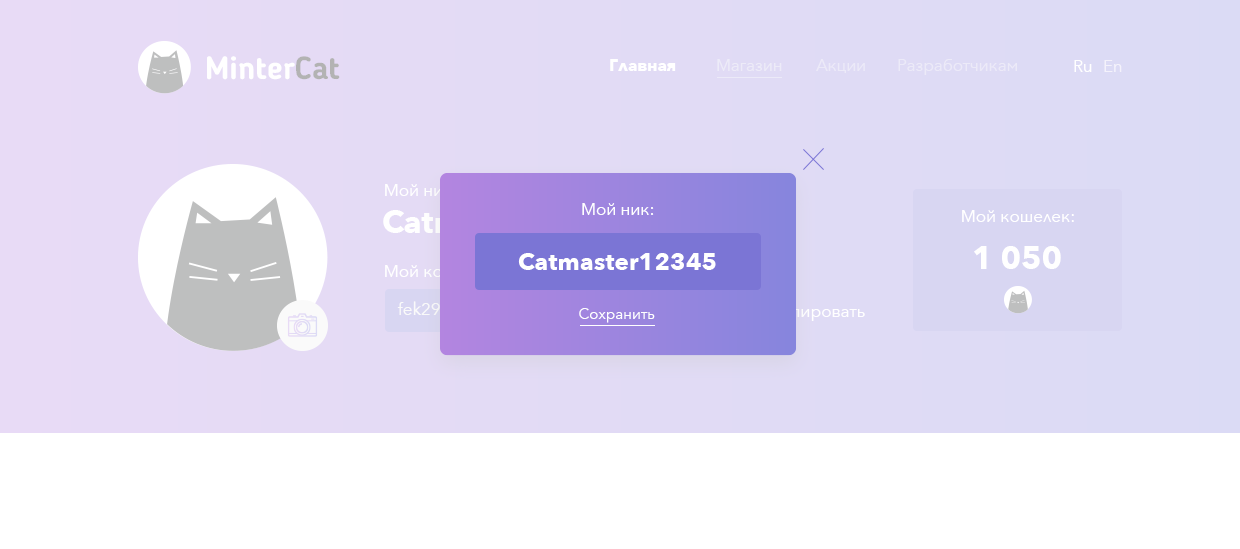
<style>
.page{position:relative;width:1240px;height:549px;background:#ffffff}
.page>*{position:absolute;margin:0}
.t1{font:16.7px "AvenirNext-Bold";color:#ffffff}
.t2{font:16.7px "AvenirNext-Regular";color:#edebf8}
.t3{font:16.7px "AvenirNext-Regular";color:#eceaf8}
.t4{font:16.7px "AvenirNext-Regular";color:#ffffff}
.t5{font:16.7px "AvenirNext-Regular";color:#f4f2fb}
.t6{font:16.9px "AvenirNext-Regular";color:#ffffff}
.t7{font:31.9px "AvenirNext-Bold";color:#ffffff}
.t8{font:24.4px "AvenirNext-Bold";color:#ffffff}
.t9{font:15px "AvenirNext-Regular";color:#ffffff}
</style>
<div class="page">
<p class="t1" style="left:610px;top:59px;width:66px;height:12px">Главная</p>
<p class="t2" style="left:717px;top:59px;width:65px;height:12px">Магазин</p>
<p class="t3" style="left:816px;top:59px;width:49px;height:14px">Акции</p>
<p class="t3" style="left:898px;top:59px;width:119px;height:16px">Разработчикам</p>
<p class="t4" style="left:1074px;top:60px;width:18px;height:12px">Ru</p>
<p class="t5" style="left:1104px;top:60px;width:18px;height:12px">En</p>
<p class="t6" style="left:582px;top:203px;width:72px;height:12px">Мой ник:</p>
<p class="t6" style="left:962px;top:210px;width:112px;height:12px">Мой кошелек:</p>
<p class="t7" style="left:974px;top:246px;width:87px;height:23px">1 050</p>
<p class="t8" style="left:518px;top:253px;width:198px;height:17px">Catmaster12345</p>
<p class="t9" style="left:579px;top:308px;width:76px;height:15px">Сохранить</p>
</div>
